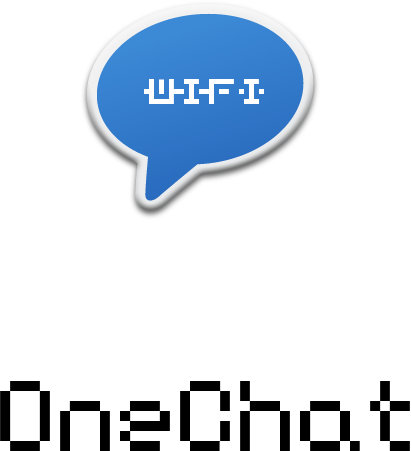
<style>
.page{position:relative;width:411px;height:451px;background:#ffffff}
.page>*{position:absolute;margin:0}
.t1{font:100px "BMharryA10";color:#000000}
</style>
<div class="page">
<p class="t1" style="left:0px;top:381px;width:410px;height:70px">OneChat</p>
</div>
